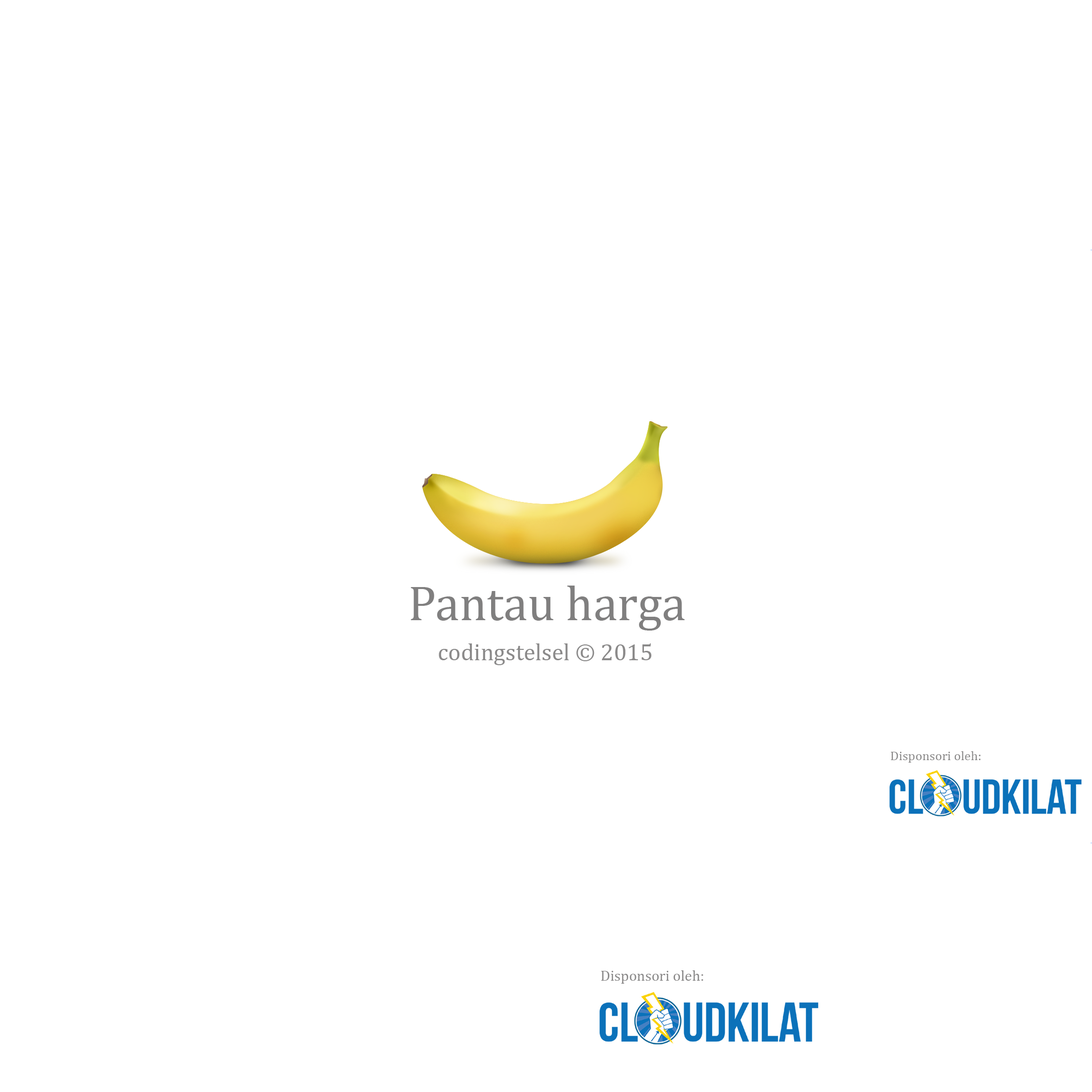
<style>
.page{position:relative;width:1092px;height:1092px;background:#ffffff}
.page>*{position:absolute;margin:0}
.t1{font:49.5px "Cambria";color:#807f7f}
.t2{font:23.7px "Cambria";color:#8b8a8a}
.t3{font:13px "Cambria";color:#8b8a8a}
.t4{font:14.8px "Cambria";color:#8b8a8a}
</style>
<div class="page">
<p class="t1" style="left:410px;top:586px;width:275px;height:45px">Pantau harga</p>
<p class="t2" style="left:439px;top:643px;width:212px;height:22px">codingstelsel © 2015</p>
<p class="t3" style="left:891px;top:751px;width:90px;height:12px">Disponsori oleh:</p>
<p class="t4" style="left:601px;top:970px;width:102px;height:14px">Disponsori oleh:</p>
</div>
